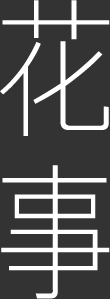
<style>
.page{position:relative;width:110px;height:299px;background:#333333}
.page>*{position:absolute;margin:0}
.t1{font:150px "FZJUNH_XIANJW--GB1-0";letter-spacing:0.1em;color:#ffffff}
</style>
<div class="page">
<p class="t1" style="left:0px;top:0px;width:110px;height:299px">花事</p>
</div>
